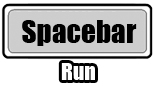
<style>
.page{position:relative;width:154px;height:87px;background:#ffffff}
.page>*{position:absolute;margin:0}
.t1{font:29.3px "Impact";color:#000000}
.t2{font:21.9px "Impact";color:#ffffff}
</style>
<div class="page">
<p class="t1" style="left:22px;top:20px;width:115px;height:26px">Spacebar</p>
<p class="t2" style="left:61px;top:63px;width:34px;height:17px">Run</p>
</div>
